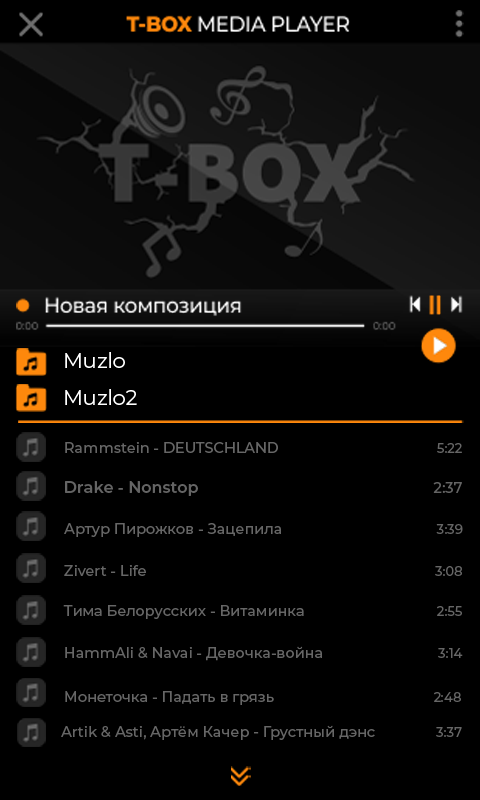
<style>
.page{position:relative;width:480px;height:800px;background:#000000}
.page>*{position:absolute;margin:0}
.t1{font:20.7px "Montserrat-Regular";color:#ffffff}
.t2{font:14.5px "Montserrat-Medium";color:#666666}
.t3{font:13.1px "Montserrat-Medium";color:#666666}
.t4{font:16px "Montserrat-SemiBold";color:#646464}
.t5{font:14.5px "Montserrat-Medium";color:#646464}
.t6{font:14.6px "Montserrat-Medium";color:#666666}
.t7{font:13.2px "Montserrat-Medium";color:#666666}
</style>
<div class="page">
<p class="t1" style="left:65px;top:352px;width:60px;height:16px">Muzlo</p>
<p class="t1" style="left:65px;top:389px;width:72px;height:16px">Muzlo2</p>
<p class="t2" style="left:65px;top:442px;width:213px;height:11px">Rammstein - DEUTSCHLAND</p>
<p class="t3" style="left:437px;top:443px;width:25px;height:10px">5:22</p>
<p class="t4" style="left:65px;top:481px;width:133px;height:15px">Drake - Nonstop</p>
<p class="t5" style="left:433px;top:482px;width:29px;height:11px">2:37</p>
<p class="t2" style="left:64px;top:523px;width:217px;height:14px">Артур Пирожков - Зацепила</p>
<p class="t3" style="left:436px;top:524px;width:27px;height:10px">3:39</p>
<p class="t2" style="left:64px;top:565px;width:82px;height:11px">Zivert - Life</p>
<p class="t3" style="left:435px;top:566px;width:27px;height:10px">3:08</p>
<p class="t2" style="left:63px;top:605px;width:241px;height:14px">Тима Белорусских - Витаминка</p>
<p class="t3" style="left:437px;top:606px;width:25px;height:10px">2:55</p>
<p class="t2" style="left:65px;top:646px;width:257px;height:15px">HammAli &amp; Navai - Девочка-война</p>
<p class="t3" style="left:438px;top:648px;width:25px;height:10px">3:14</p>
<p class="t2" style="left:65px;top:691px;width:209px;height:14px">Монеточка - Падать в грязь</p>
<p class="t3" style="left:434px;top:692px;width:27px;height:10px">2:48</p>
<p class="t6" style="left:61px;top:725px;width:314px;height:15px">Artik &amp; Asti, Артём Качер - Грустный дэнс</p>
<p class="t7" style="left:436px;top:727px;width:26px;height:10px">3:37</p>
</div>
